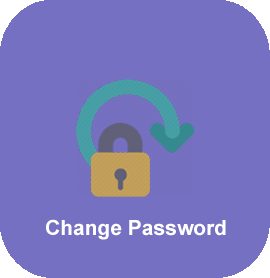
<style>
.page{position:relative;width:270px;height:278px;background:#7570c1}
.page>*{position:absolute;margin:0}
.t1{font:21px "Arial-BoldMT";color:#ffffff}
</style>
<div class="page">
<p class="t1" style="left:46px;top:219px;width:180px;height:21px">Change Password</p>
</div>
